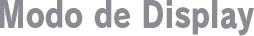
<style>
.page{position:relative;width:254px;height:36px;background:#ffffff}
.page>*{position:absolute;margin:0}
.t1{font:36px "RodinPro-EB";letter-spacing:0.001em;color:#8b8c92;scale:0.81 1}
</style>
<div class="page">
<p class="t1" style="left:0px;top:0px;width:254px;height:36px">Modo de Display</p>
</div>
